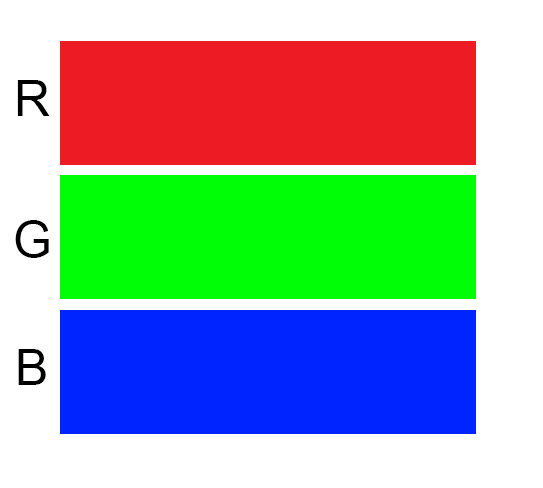
<style>
.page{position:relative;width:543px;height:488px;background:#ffffff}
.page>*{position:absolute;margin:0}
.t1{font:12px "ArialMT";color:#000000}
</style>
<div class="page">
<p class="t1" style="left:17px;top:80px;width:33px;height:36px">R</p>
<p class="t1" style="left:15px;top:220px;width:34px;height:38px">G</p>
<p class="t1" style="left:18px;top:349px;width:28px;height:36px">B</p>
</div>
